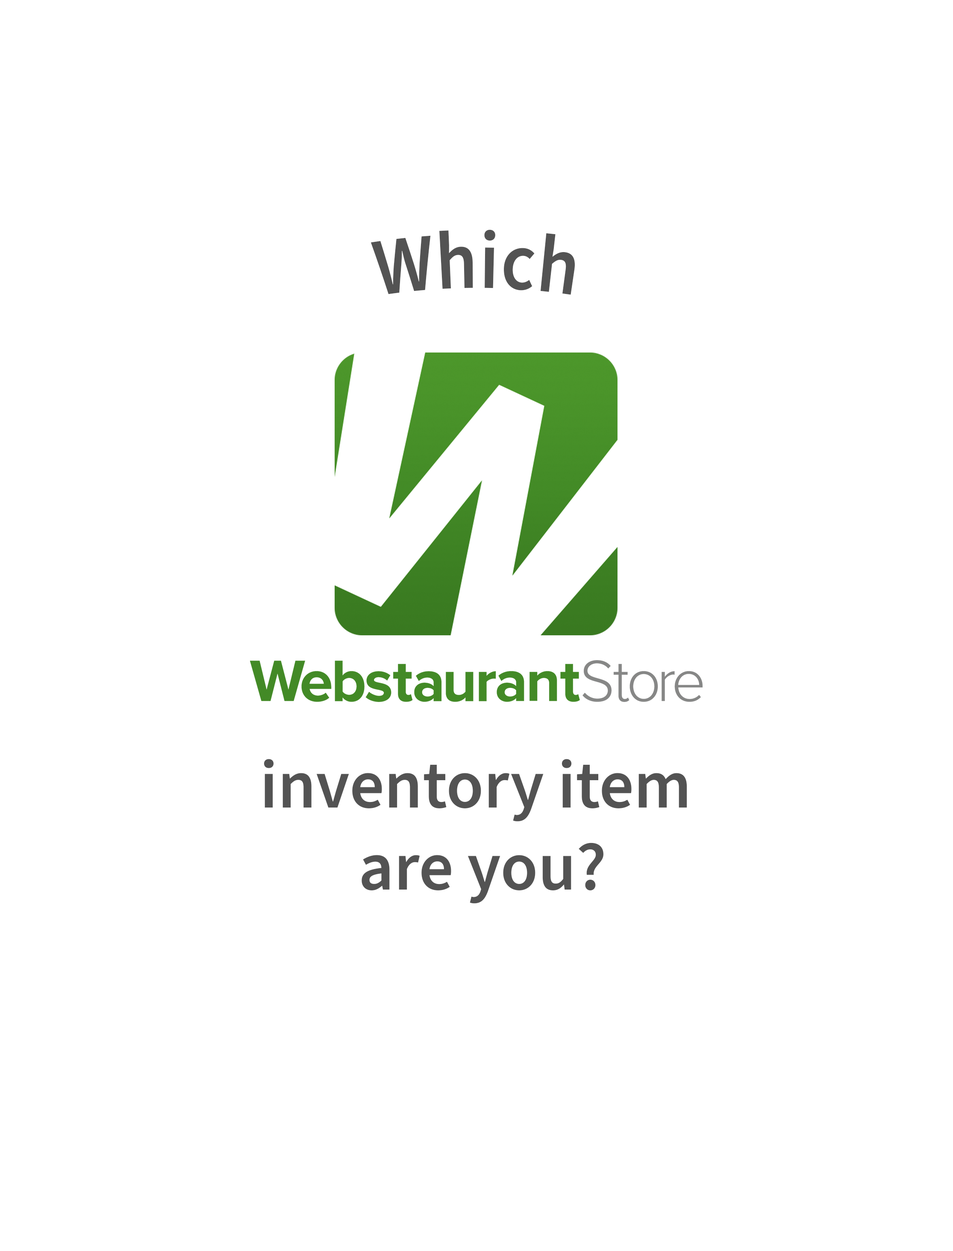
<style>
.page{position:relative;width:953px;height:1251px;background:#ffffff}
.page>*{position:absolute;margin:0}
.t1{font:82.1px "SourceSansRoman-Semibold";letter-spacing:0.025em;color:#535353;scale:0.83 1}
.t2{font:68.4px "SourceSansRoman-Semibold";color:#535353}
</style>
<div class="page">
<p class="t1" style="left:371px;top:229px;width:204px;height:66px">Which</p>
<p class="t2" style="left:264px;top:759px;width:423px;height:145px;text-align:center">inventory item <br>are you?</p>
</div>
